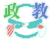
<style>
.page{position:relative;width:51px;height:40px;background:#ffffff}
.page>*{position:absolute;margin:0}
.t1{font:17.5px "FZDBSK--GBK1-0";color:#57c160}
.t2{font:17.4px "FZDBSK--GBK1-0";color:#5d81ca}
</style>
<div class="page">
<p class="t1" style="left:3px;top:2px;width:17px;height:17px">政</p>
<p class="t2" style="left:32px;top:2px;width:17px;height:17px">教</p>
</div>
